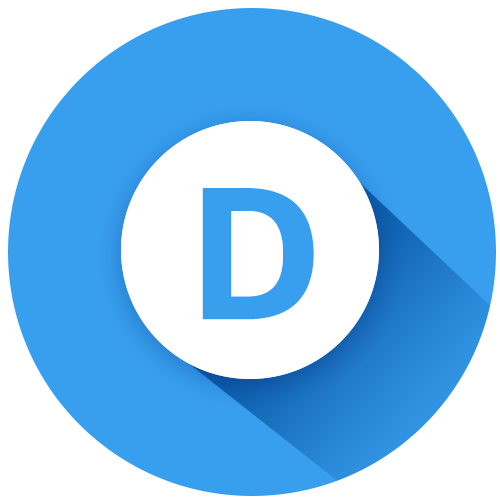
<style>
.page{position:relative;width:500px;height:500px;background:#ffffff}
.page>*{position:absolute;margin:0}
.t1{font:180.3px "FZDHTJW--GB1-0";letter-spacing:-0.02em;color:#389fee;font-weight:bold}
</style>
<div class="page">
<p class="t1" style="left:202px;top:188px;width:112px;height:132px">D</p>
</div>
